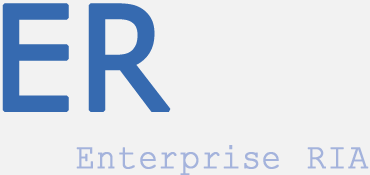
<style>
.page{position:relative;width:370px;height:175px;background:#f2f2f2}
.page>*{position:absolute;margin:0}
.t1{font:144px "Verdana";letter-spacing:0.1em;color:#366ab0;font-weight:bold;scale:0.9 1}
.t2{font:36px "CourierNewPSMT";letter-spacing:0.1em;color:#a4b3dc;font-weight:bold;scale:0.9 1}
</style>
<div class="page">
<p class="t1" style="left:2px;top:3px;width:169px;height:109px">ER</p>
<p class="t2" style="left:76px;top:145px;width:293px;height:31px">Enterprise RIA</p>
</div>
